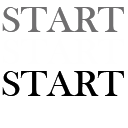
<style>
.page{position:relative;width:128px;height:128px;background:#ffffff}
.page>*{position:absolute;margin:0}
.t1{font:38px "BaskOldFace";color:#706f70}
.t2{font:38px "BaskOldFace";color:#000000}
</style>
<div class="page">
<p class="t1" style="left:2px;top:7px;width:122px;height:25px">START</p>
<p class="t2" style="left:2px;top:71px;width:122px;height:25px">START</p>
</div>
